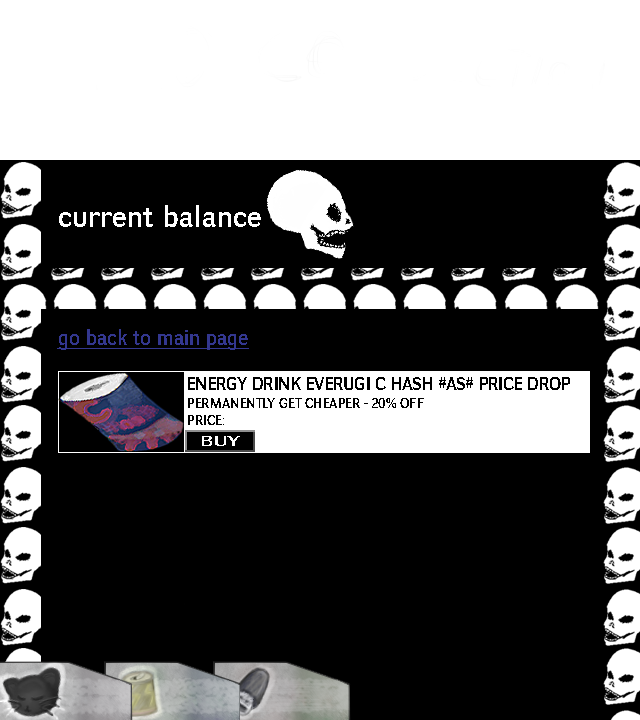
<style>
.page{position:relative;width:640px;height:720px;background:#000000}
.page>*{position:absolute;margin:0}
.t1{font:30.2px "NegotiateRg-Regular";color:#ffffff}
.t2{font:21.4px "NegotiateRg-Regular";color:#33378f;text-decoration:underline}
.t3{font:18px "NegotiateRg-Regular";color:#000000}
.t4{font:14px "NegotiateRg-Regular";color:#000000}
</style>
<div class="page">
<p class="t1" style="left:59px;top:205px;width:202px;height:22px">current balance</p>
<p class="t2" style="left:57px;top:329px;width:192px;height:21px">go back to main page</p>
<p class="t2" style="left:57px;top:329px;width:192px;height:21px">go back to main page</p>
<p class="t3" style="left:188px;top:377px;width:382px;height:13px">ENERGY DRINK EVERUGI C HASH #AS# PRICE DROP</p>
<p class="t4" style="left:188px;top:398px;width:236px;height:27px">PERMANENTLY GET CHEAPER - 20% OFF<br>PRICE:</p>
</div>
